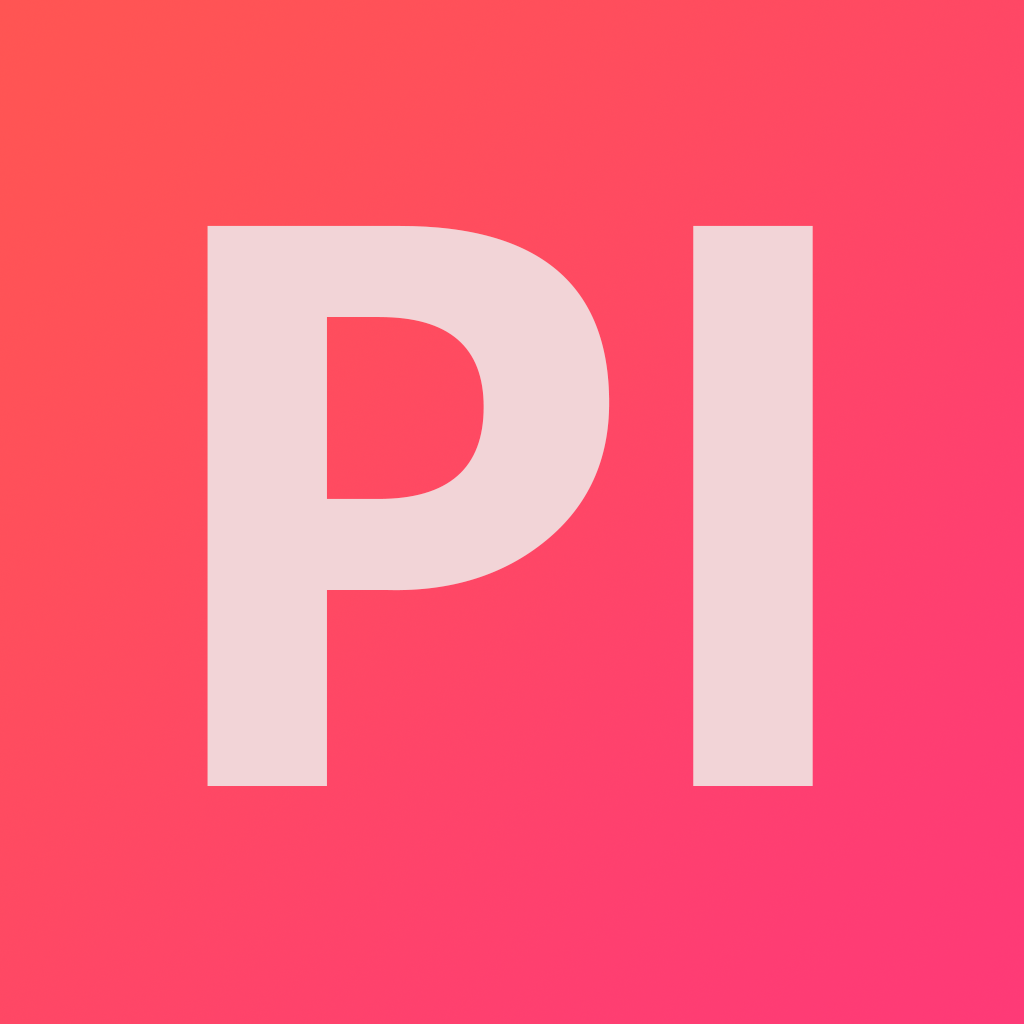
<style>
.page{position:relative;width:1024px;height:1024px}
.page>*{position:absolute;margin:0}
.t1{font:740px "MicrosoftYaHei-Bold";color:#f2d4d7}
</style>
<div class="page">
<p class="t1" style="left:207px;top:225px;width:606px;height:561px">PI</p>
</div>
